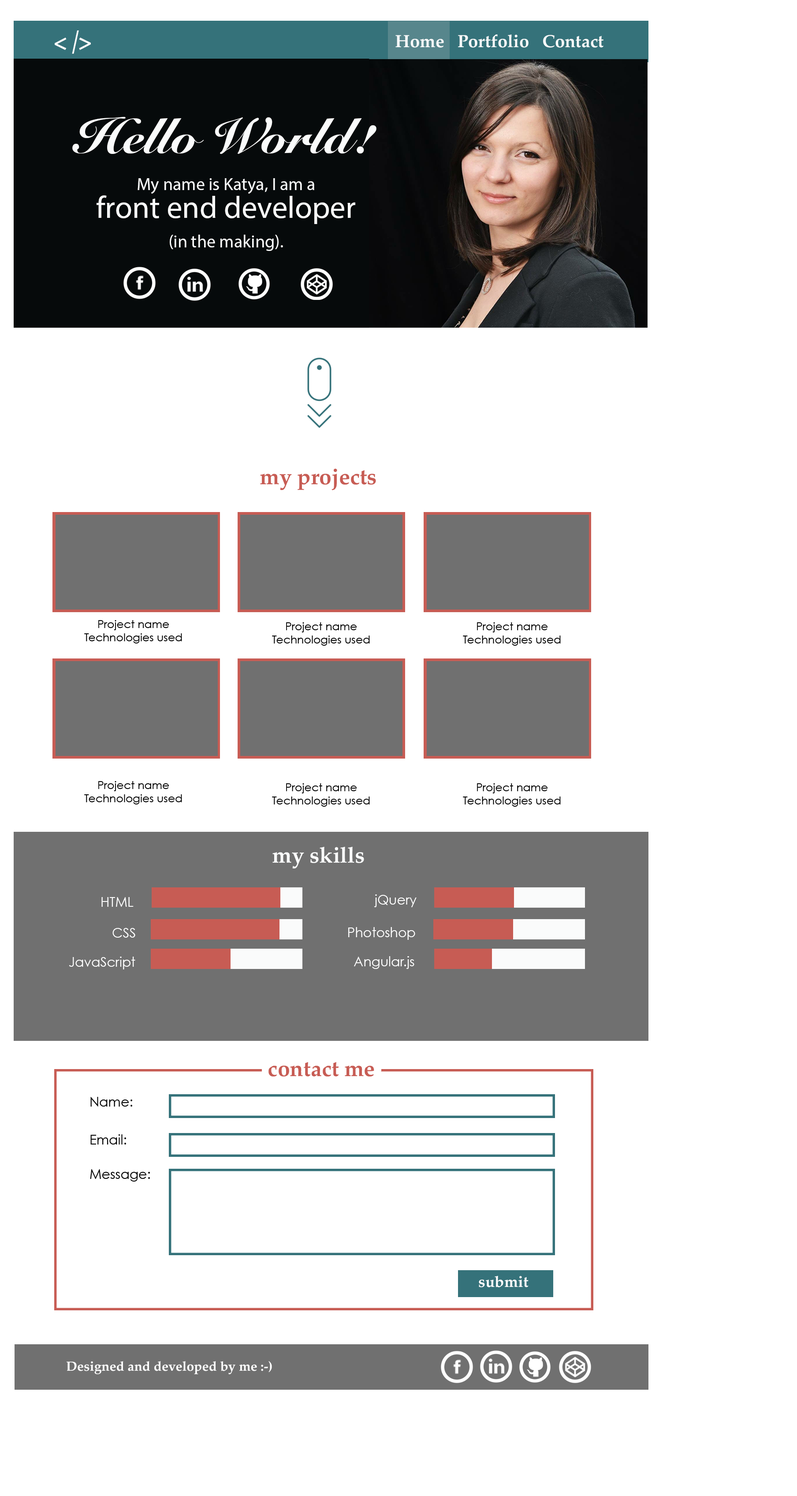
<style>
.page{position:relative;width:797px;height:1496px;background:#ffffff}
.page>*{position:absolute;margin:0}
.t1{font:26px "Palatino-Bold";color:#fafbfb;scale:0.81 1}
.t2{font:17.6px "Palatino-Bold";color:#fafbfb}
.t3{font:49.4px "SnellRoundhand-Black";color:#fafbfb}
.t4{font:17.6px "MyriadPro-Regular";color:#fafbfb}
.t5{font:17.6px "CenturyGothic";color:#fafbfb}
.t6{font:31.3px/27.8px "MyriadPro-Regular";color:#fafbfb}
.t7{font:17.6px/27.8px "MyriadPro-Regular";color:#fafbfb}
.t8{font:22px "Palatino-Bold";color:#c75c54}
.t9{font:11px "CenturyGothic";color:#000000}
.t10{font:22px "Palatino-Bold";color:#fafbfb}
.t11{font:13.2px "CenturyGothic";color:#ffffff}
.t12{font:13.2px "CenturyGothic";color:#000000}
.t13{font:15.4px "Palatino-Bold";color:#ffffff}
.t14{font:13.2px "Palatino-Bold";color:#ffffff}
</style>
<div class="page">
<p class="t1" style="left:55px;top:30px;width:36px;height:24px">&lt; /&gt;</p>
<p class="t2" style="left:396px;top:34px;width:208px;height:14px">Home   Portfolio   Contact</p>
<p class="t3" style="left:72px;top:117px;width:305px;height:37px">Hello World!</p>
<p class="t4" style="left:97px;top:178px;width:258px;height:73px;text-align:center"><span class="t5"><br></span>My name is Katya, I am a<br><span class="t6">front end developer <br></span><span class="t7">(in the making).</span></p>
<p class="t8" style="left:260px;top:468px;width:116px;height:22px">my projects</p>
<p class="t9" style="left:84px;top:620px;width:98px;height:23px;text-align:center">Project name<br>Technologies used</p>
<p class="t9" style="left:272px;top:622px;width:98px;height:24px;text-align:center">Project name<br>Technologies used</p>
<p class="t9" style="left:463px;top:622px;width:98px;height:24px;text-align:center">Project name<br>Technologies used</p>
<p class="t9" style="left:84px;top:781px;width:98px;height:23px;text-align:center">Project name<br>Technologies used</p>
<p class="t9" style="left:272px;top:783px;width:98px;height:23px;text-align:center">Project name<br>Technologies used</p>
<p class="t9" style="left:463px;top:783px;width:98px;height:23px;text-align:center">Project name<br>Technologies used</p>
<p class="t10" style="left:273px;top:847px;width:91px;height:22px">my skills</p>
<p class="t11" style="left:101px;top:897px;width:33px;height:10px">HTML</p>
<p class="t11" style="left:374px;top:894px;width:43px;height:13px">jQuery</p>
<p class="t11" style="left:112px;top:928px;width:23px;height:9px">CSS</p>
<p class="t11" style="left:348px;top:927px;width:67px;height:13px">Photoshop</p>
<p class="t11" style="left:69px;top:956px;width:66px;height:13px">JavaScript</p>
<p class="t11" style="left:354px;top:956px;width:60px;height:13px">Angular.js</p>
<p class="t8" style="left:269px;top:1062px;width:105px;height:14px">contact me</p>
<p class="t12" style="left:90px;top:1097px;width:42px;height:9px">Name:</p>
<p class="t12" style="left:90px;top:1134px;width:36px;height:10px">Email:</p>
<p class="t12" style="left:90px;top:1169px;width:60px;height:12px">Message:</p>
<p class="t13" style="left:479px;top:1275px;width:50px;height:12px">submit</p>
<p class="t14" style="left:67px;top:1361px;width:205px;height:13px">Designed and developed by me :-)</p>
</div>
